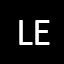
<style>
.page{position:relative;width:64px;height:64px;background:#000000}
.page>*{position:absolute;margin:0}
.t1{font:40px "Calibri";color:#feffff}
</style>
<div class="page">
<p class="t1" style="left:19px;top:20px;width:31px;height:25px">LE</p>
</div>
